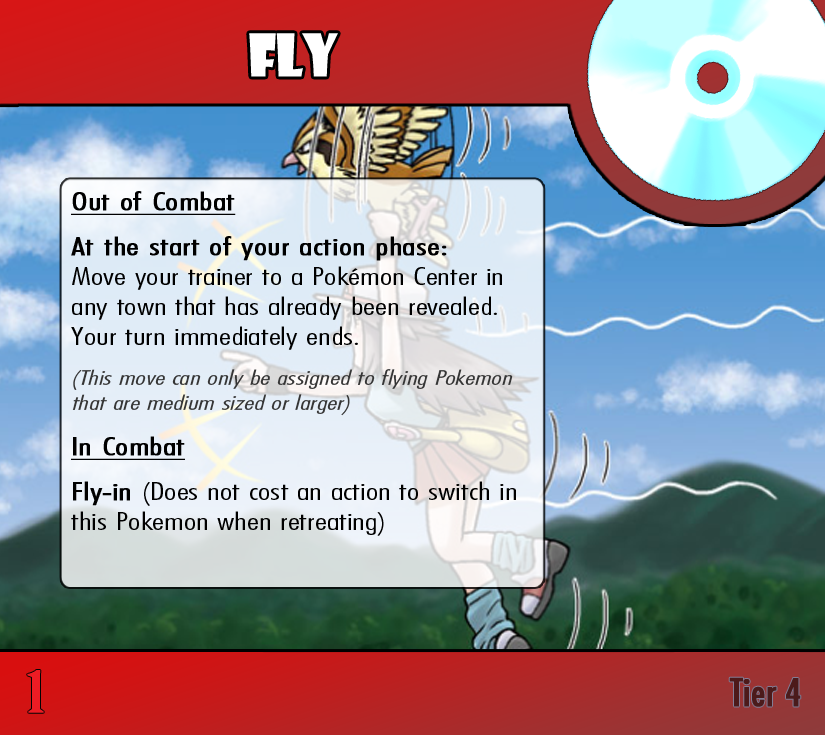
<style>
.page{position:relative;width:825px;height:735px}
.page>*{position:absolute;margin:0}
.t1{font:57.4px "ShowcardGothic-Reg";letter-spacing:-0.025em;color:#ffffff;scale:0.91 1}
.t2{font:25px "FuturaCondensedBQ-Light";color:#000000;scale:1.5 1}
.t3{font:25px "FuturaCondensedBQ-Light";color:#000000;font-weight:bold;text-decoration:underline;scale:1.5 1}
.t4{font:25px "FuturaCondensedBQ-Light";color:#000000;font-weight:bold;scale:1.5 1}
.t5{font:20.8px "FuturaCondensedBQ-Light";color:#353535;font-style:italic;scale:1.5 1}
.t6{font:55.6px "BirchStd";color:#ed1c24;font-weight:bold;scale:1.5 1}
.t7{font:37.5px "Futura-Condensed-Normal";color:#4c1a1a;font-weight:bold}
</style>
<div class="page">
<p class="t1" style="left:249px;top:33px;width:89px;height:44px">Fly</p>
<p class="t2" style="left:71px;top:191px;width:445px;height:345px"><span class="t3">Out of Combat<br><br></span><span class="t4">At the start of your action phase: <br></span>Move your trainer to a Pokémon Center in any town that has already been revealed. Your turn immediately ends.<br><br><span class="t5">(This move can only be assigned to flying Pokemon that are medium sized or larger)<br><br></span><span class="t3">In Combat<br><br></span><span class="t4">Fly-in </span>(Does not cost an action to switch in this Pokemon when retreating)</p>
<p class="t6" style="left:27px;top:670px;width:17px;height:43px">1</p>
<p class="t7" style="left:729px;top:677px;width:72px;height:30px">Tier 4</p>
</div>
